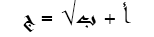
<style>
.page{position:relative;width:154px;height:37px;background:#ffffff}
.page>*{position:absolute;margin:0}
.t1{font:20.8px "Andalus";color:#000000}
.t2{font:20.8px "TimesNewRomanPSMT";color:#000000}
</style>
<div class="page">
<p class="t1" style="left:23px;top:0px;width:108px;height:32px">أ + ب<span class="t2">√</span> = ج</p>
</div>
